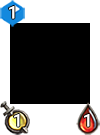
<style>
.page{position:relative;width:100px;height:135px;background:#000000}
.page>*{position:absolute;margin:0}
.t1{font:17px "Roboto-Regular";color:#ffffff;font-weight:bold}
</style>
<div class="page">
<p class="t1" style="left:9px;top:6px;width:6px;height:13px">1</p>
<p class="t1" style="left:14px;top:114px;width:6px;height:13px">1</p>
<p class="t1" style="left:84px;top:114px;width:6px;height:13px">1</p>
</div>
